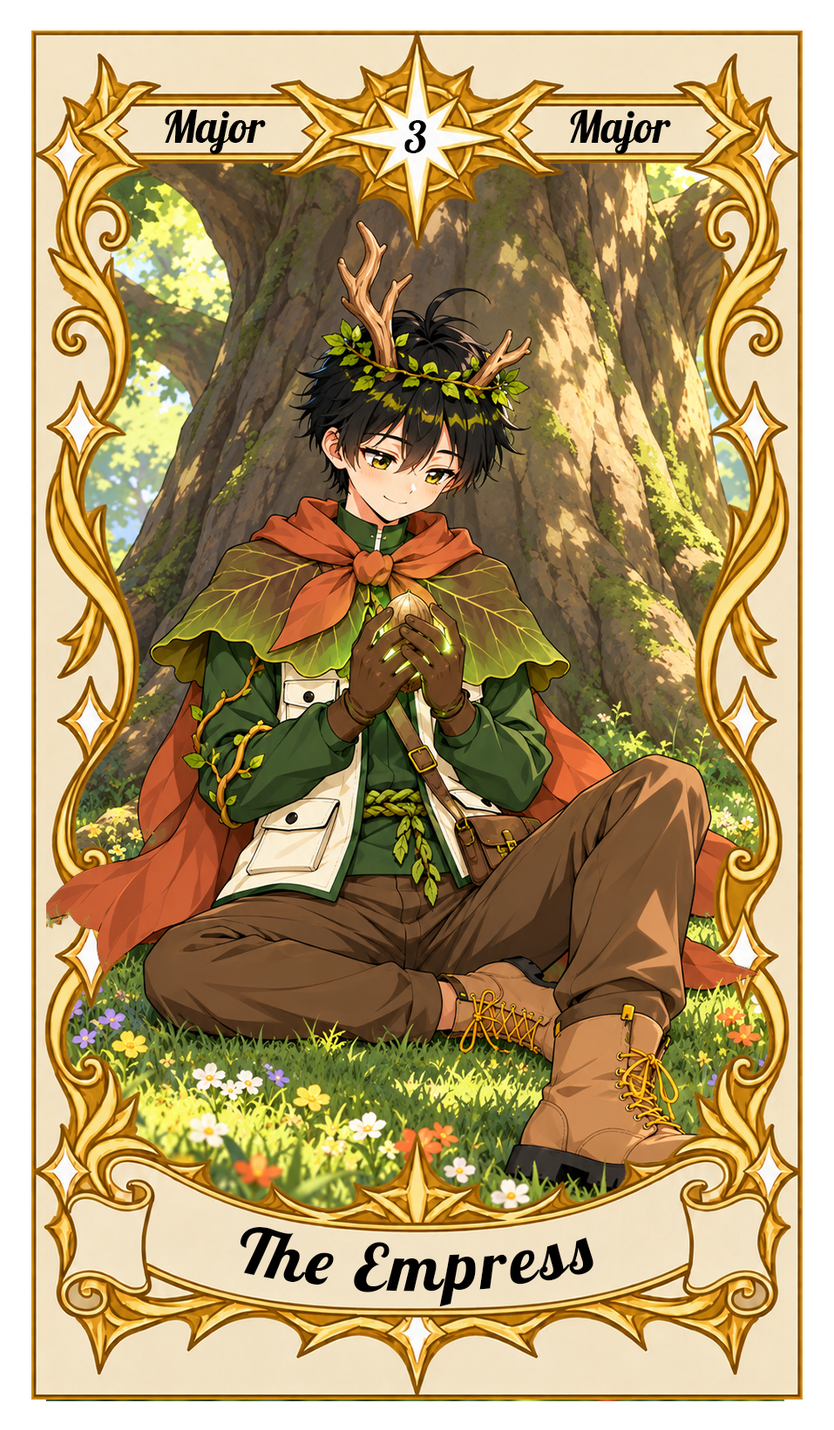
<style>
.page{position:relative;width:834px;height:1430px}
.page>*{position:absolute;margin:0}
.t1{font:43.6px "Lobster-Regular";color:#000000}
.t2{font:65.3px "Lobster-Regular";letter-spacing:0.05em;color:#000000}
</style>
<div class="page">
<p class="t1" style="left:165px;top:110px;width:101px;height:44px">Major</p>
<p class="t1" style="left:570px;top:110px;width:101px;height:44px">Major</p>
<p class="t1" style="left:404px;top:120px;width:22px;height:33px">3</p>
<p class="t2" style="left:240px;top:1227px;width:353px;height:81px">The Empress</p>
</div>
